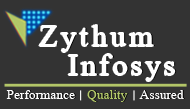
<style>
.page{position:relative;width:190px;height:109px;background:#333333}
.page>*{position:absolute;margin:0}
.t1{font:30.3px "MongolianBaiti";letter-spacing:0.12em;color:#ffffff}
.t2{font:30.3px "MongolianBaiti";letter-spacing:0.1em;color:#ffffff}
.t3{font:13.4px "MongolianBaiti";color:#ffffff}
.t4{font:13.4px "MongolianBaiti";color:#b2c768}
</style>
<div class="page">
<p class="t1" style="left:39px;top:25px;width:114px;height:27px">Zythum</p>
<p class="t1" style="left:40px;top:25px;width:115px;height:27px">Zythum</p>
<p class="t2" style="left:68px;top:54px;width:107px;height:27px">Infosys</p>
<p class="t2" style="left:70px;top:54px;width:107px;height:27px">Infosys</p>
<p class="t3" style="left:6px;top:90px;width:69px;height:9px">Performance</p>
<p class="t4" style="left:87px;top:90px;width:41px;height:12px">Quality</p>
<p class="t3" style="left:139px;top:90px;width:45px;height:9px">Assured</p>
</div>
